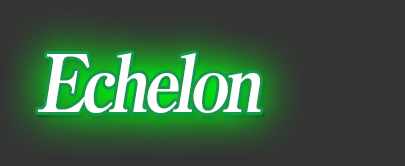
<style>
.page{position:relative;width:405px;height:166px;background:#333333}
.page>*{position:absolute;margin:0}
.t1{font:80px "RyuminPro-ExBold";letter-spacing:-0.08em;color:#ffffff;font-style:italic;scale:0.9 1}
</style>
<div class="page">
<p class="t1" style="left:38px;top:53px;width:223px;height:60px">Echelon</p>
</div>
